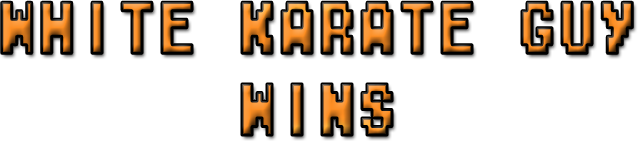
<style>
.page{position:relative;width:638px;height:141px;background:#ffffff}
.page>*{position:absolute;margin:0}
.t1{font:68px "M04_FATAL-FURY-BLACK";scale:0.59 1}
</style>
<div class="page">
<p class="t1" style="left:1px;top:2px;width:632px;height:133px;text-align:center">white karate guy wins</p>
</div>
